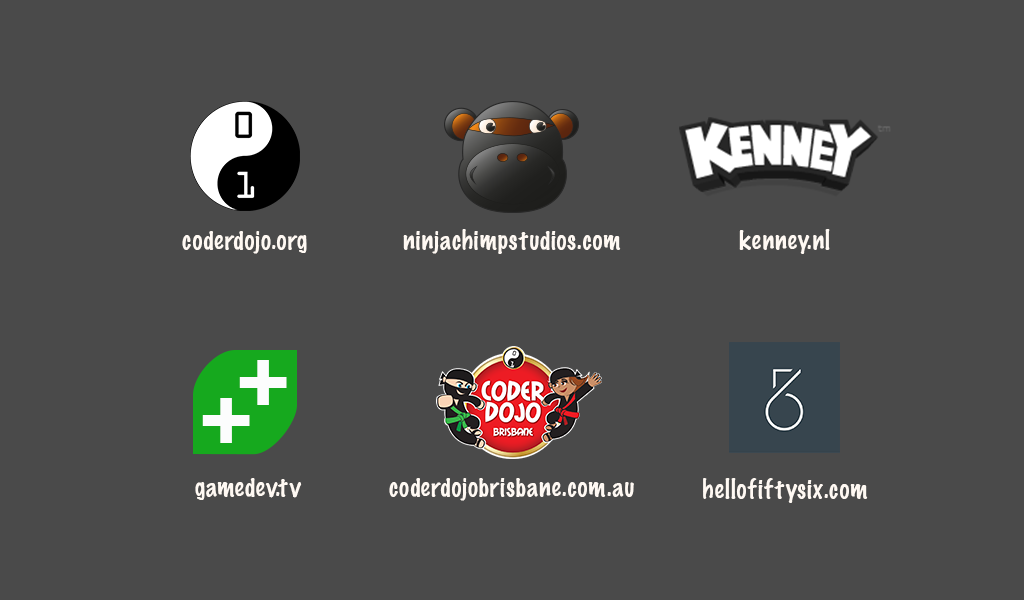
<style>
.page{position:relative;width:1024px;height:600px;background:#4a4a4a}
.page>*{position:absolute;margin:0}
.t1{font:24px "MarkerFelt-Thin";color:#fff9f3}
.t2{font:93.3px "Arial-BoldMT";color:#fcfdfd}
</style>
<div class="page">
<p class="t1" style="left:182px;top:231px;width:125px;height:23px">coderdojo.org</p>
<p class="t1" style="left:403px;top:229px;width:218px;height:25px">ninjachimpstudios.com</p>
<p class="t1" style="left:739px;top:229px;width:91px;height:25px">kenney.nl</p>
<p class="t2" style="left:239px;top:360px;width:48px;height:45px">+</p>
<p class="t2" style="left:202px;top:398px;width:48px;height:45px">+</p>
<p class="t1" style="left:195px;top:478px;width:107px;height:22px">gamedev.tv</p>
<p class="t1" style="left:389px;top:478px;width:245px;height:23px">coderdojobrisbane.com.au</p>
<p class="t1" style="left:703px;top:478px;width:165px;height:25px">hellofiftysix.com</p>
</div>
